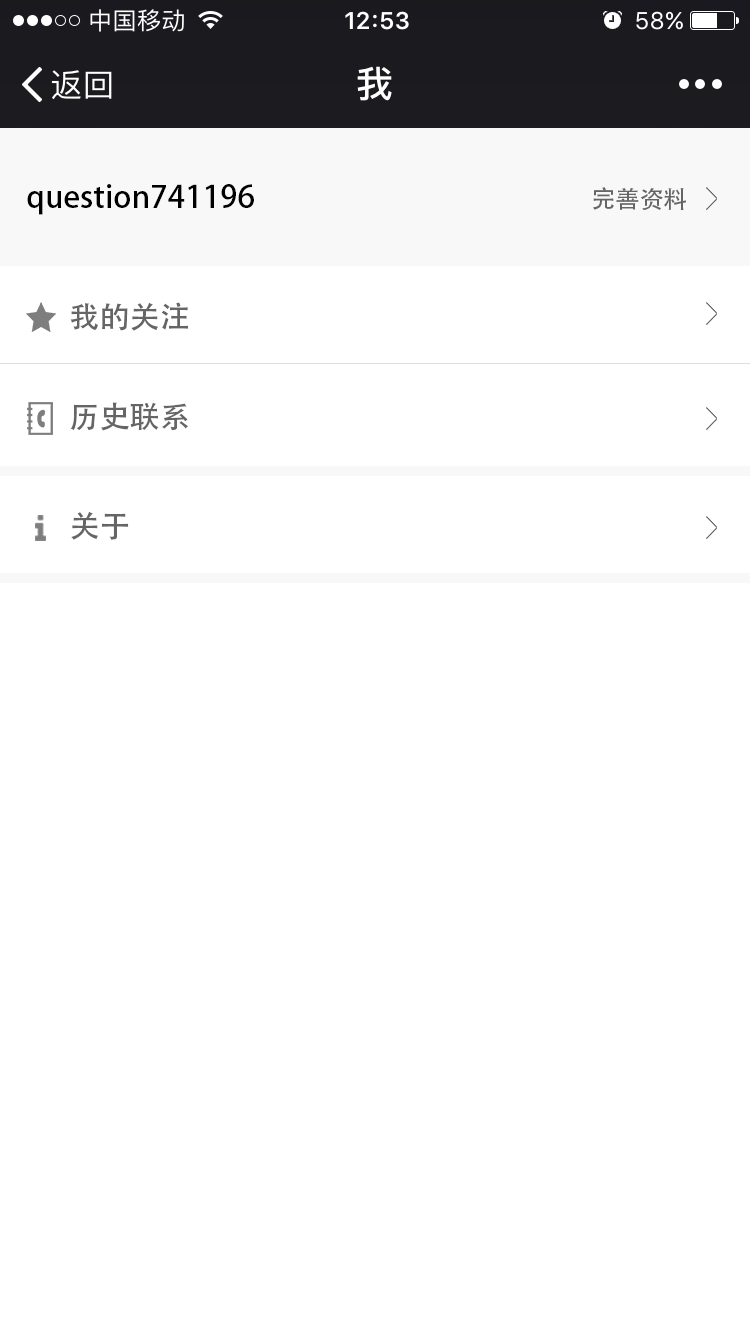
<style>
.page{position:relative;width:750px;height:1334px;background:#ffffff}
.page>*{position:absolute;margin:0}
.t1{font:31px "AdobeHeitiStd-Regular";color:#000000}
.t2{font:24.1px "AdobeHeitiStd-Regular";color:#656565}
.t3{font:30px/100px "AdobeHeitiStd-Regular";color:#656565}
.t4{font:30px "AdobeHeitiStd-Regular";color:#656565}
</style>
<div class="page">
<p class="t1" style="left:27px;top:184px;width:227px;height:31px">question741196</p>
<p class="t2" style="left:593px;top:187px;width:93px;height:23px">完善资料</p>
<p class="t3" style="left:70px;top:302px;width:118px;height:129px">我的关注<br>历史联系</p>
<p class="t4" style="left:71px;top:511px;width:58px;height:29px">关于</p>
</div>
